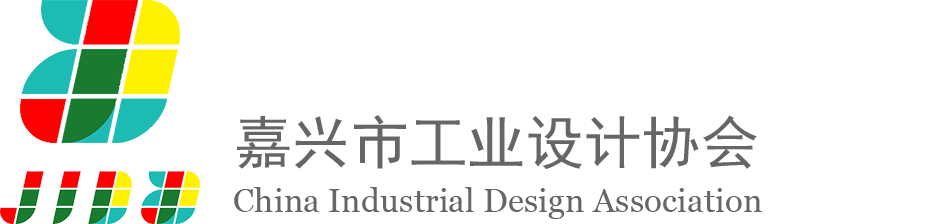
<style>
.page{position:relative;width:945px;height:224px;background:#ffffff}
.page>*{position:absolute;margin:0}
.t1{font:58.3px "SimHei";color:#666666}
.t2{font:33.3px "Georgia";color:#666666}
</style>
<div class="page">
<p class="t1" style="left:237px;top:115px;width:520px;height:54px">嘉兴市工业设计协会</p>
<p class="t2" style="left:234px;top:187px;width:528px;height:32px">China Industrial Design Association</p>
</div>
